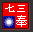
<style>
.page{position:relative;width:33px;height:32px;background:#f20000}
.page>*{position:absolute;margin:0}
.t1{font:10.4px "SimSun";color:#ffffff}
.t2{font:11.7px "SimSun";color:#ffffff}
</style>
<div class="page">
<p class="t1" style="left:5px;top:4px;width:20px;height:8px">七三</p>
<p class="t2" style="left:16px;top:15px;width:11px;height:12px">奉</p>
</div>
